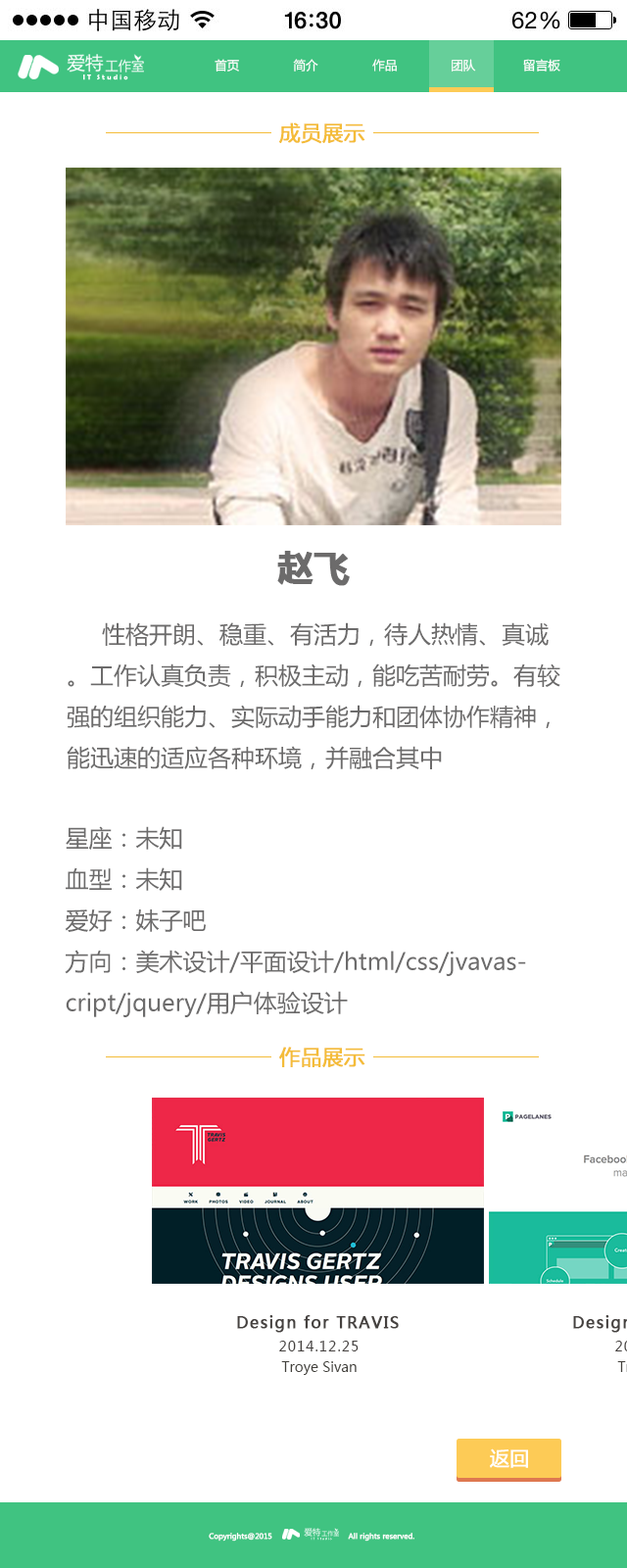
<style>
.page{position:relative;width:627px;height:1568px;background:#ffffff}
.page>*{position:absolute;margin:0}
.t1{font:12.3px "MicrosoftYaHei";color:#ffffff}
.t2{font:7.7px "BerlinSansFBDemi-Bold";color:#ffffff}
.t3{font:20.9px "MicrosoftYaHei";color:#f4bc39;font-weight:bold}
.t4{font:35.3px "MicrosoftYaHei-Bold";color:#6c6b6b;font-weight:bold}
.t5{font:23.5px "MicrosoftYaHei";color:#6c6b6b}
.t6{font:15.7px "MicrosoftYaHei";letter-spacing:0.075em;color:#45413f;font-weight:bold}
.t7{font:13.7px "MicrosoftYaHei";letter-spacing:0.075em;color:#45413f}
.t8{font:13.7px "MicrosoftYaHei";color:#43413c}
.t9{font:19.5px "MicrosoftYaHei";color:#ffffff;font-weight:bold}
.t10{font:7px "MicrosoftYaHei";color:#ffffff;font-weight:bold}
.t11{font:3.5px "BerlinSansFBDemi-Bold"}
</style>
<div class="page">
<p class="t1" style="left:215px;top:59px;width:24px;height:13px">首页</p>
<p class="t1" style="left:293px;top:59px;width:25px;height:13px">简介</p>
<p class="t1" style="left:372px;top:59px;width:25px;height:13px">作品</p>
<p class="t1" style="left:452px;top:59px;width:24px;height:13px">团队</p>
<p class="t1" style="left:523px;top:59px;width:38px;height:13px">留言板</p>
<p class="t2" style="left:83px;top:74px;width:45px;height:6px">I T   S t u d i o</p>
<p class="t3" style="left:279px;top:122px;width:87px;height:22px">成员展示</p>
<p class="t4" style="left:277px;top:551px;width:73px;height:35px">赵飞</p>
<p class="t5" style="left:67px;top:622px;width:494px;height:147px">性格开朗、稳重、有活力，待人热情、真诚。工作认真负责，积极主动，能吃苦耐劳。有较强的组织能力、实际动手能力和团体协作精神，能迅速的适应各种环境，并融合其中</p>
<p class="t5" style="left:65px;top:826px;width:461px;height:191px">星座：未知<br>血型：未知<br>爱好：妹子吧<br>方向：美术设计/平面设计/html/css/jvavascript/jquery/用户体验设计</p>
<p class="t3" style="left:279px;top:1047px;width:87px;height:20px">作品展示</p>
<p class="t6" style="left:237px;top:1315px;width:162px;height:18px">Design for TRAVIS</p>
<p class="t7" style="left:279px;top:1341px;width:80px;height:10px">2014.12.25</p>
<p class="t8" style="left:281px;top:1361px;width:76px;height:14px">Troye Sivan</p>
<p class="t9" style="left:490px;top:1448px;width:38px;height:20px">返回</p>
<p class="t10" style="left:209px;top:1533px;width:63px;height:9px">Copyrights@2015</p>
<p class="t11" style="left:311px;top:1537px;width:21px;height:4px">I T   S t u d i o</p>
<p class="t10" style="left:348px;top:1533px;width:67px;height:9px">All rights reserved.</p>
</div>
